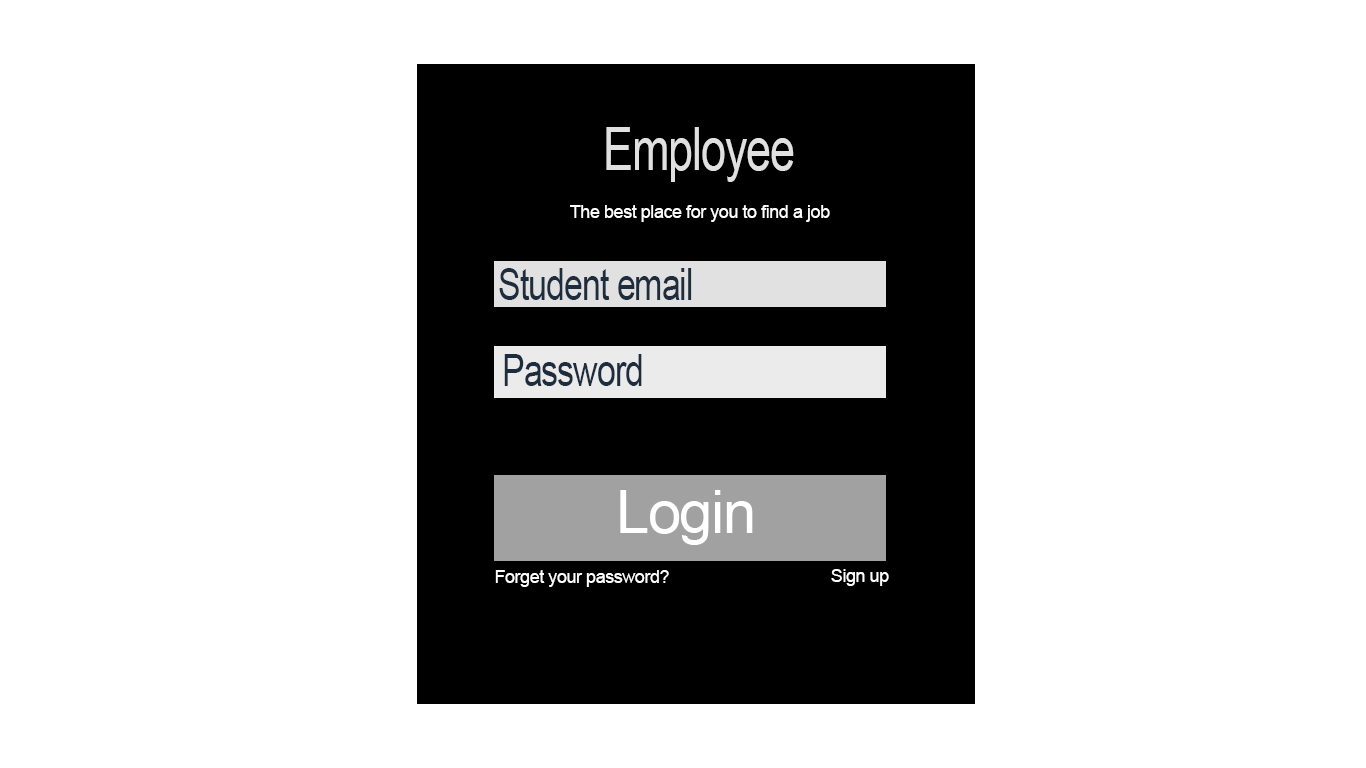
<style>
.page{position:relative;width:1366px;height:768px;background:#ffffff}
.page>*{position:absolute;margin:0}
.t1{font:60px "ArialMT";letter-spacing:-0.025em;color:#e0e0e0;scale:0.75 1}
.t2{font:18px "ArialMT";letter-spacing:-0.025em;color:#ffffff}
.t3{font:44.8px "ArialMT";letter-spacing:-0.025em;color:#1e2d3e;scale:0.75 1}
.t4{font:60px "ArialMT";letter-spacing:-0.025em;color:#ffffff}
</style>
<div class="page">
<p class="t1" style="left:606px;top:127px;width:188px;height:55px">Employee</p>
<p class="t2" style="left:570px;top:205px;width:260px;height:17px">The best place for you to find a job</p>
<p class="t3" style="left:499px;top:268px;width:193px;height:32px">Student email</p>
<p class="t3" style="left:504px;top:354px;width:138px;height:32px">Password</p>
<p class="t4" style="left:620px;top:490px;width:133px;height:55px">Login</p>
<p class="t2" style="left:831px;top:569px;width:58px;height:17px">Sign up</p>
<p class="t2" style="left:495px;top:570px;width:174px;height:17px">Forget your password?</p>
</div>
